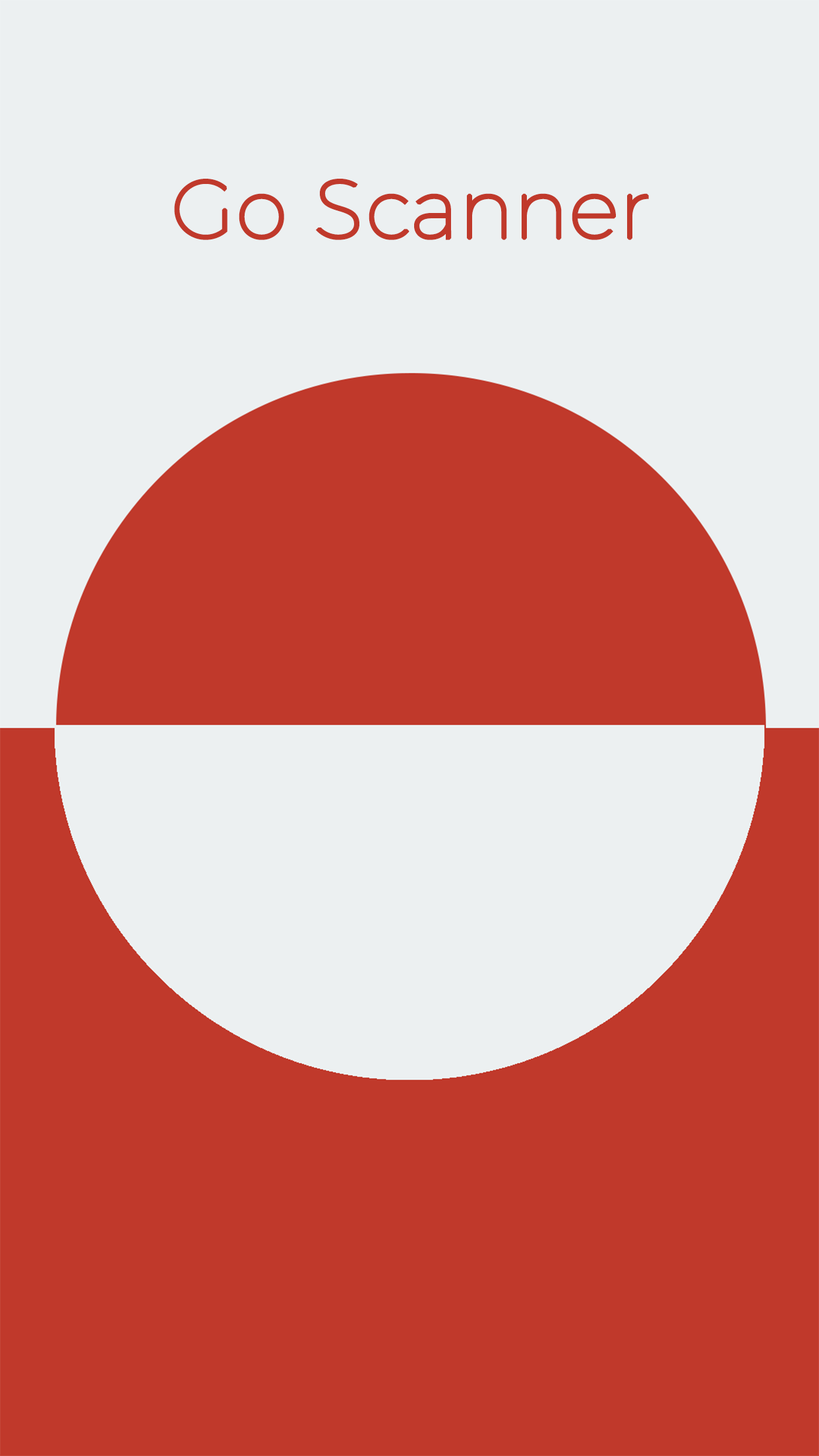
<style>
.page{position:relative;width:819px;height:1456px;background:#c0392b}
.page>*{position:absolute;margin:0}
.t1{font:82.3px "Montserrat-Hairline";color:#c0392b;font-weight:bold}
</style>
<div class="page">
<p class="t1" style="left:174px;top:179px;width:475px;height:61px">Go Scanner</p>
</div>
